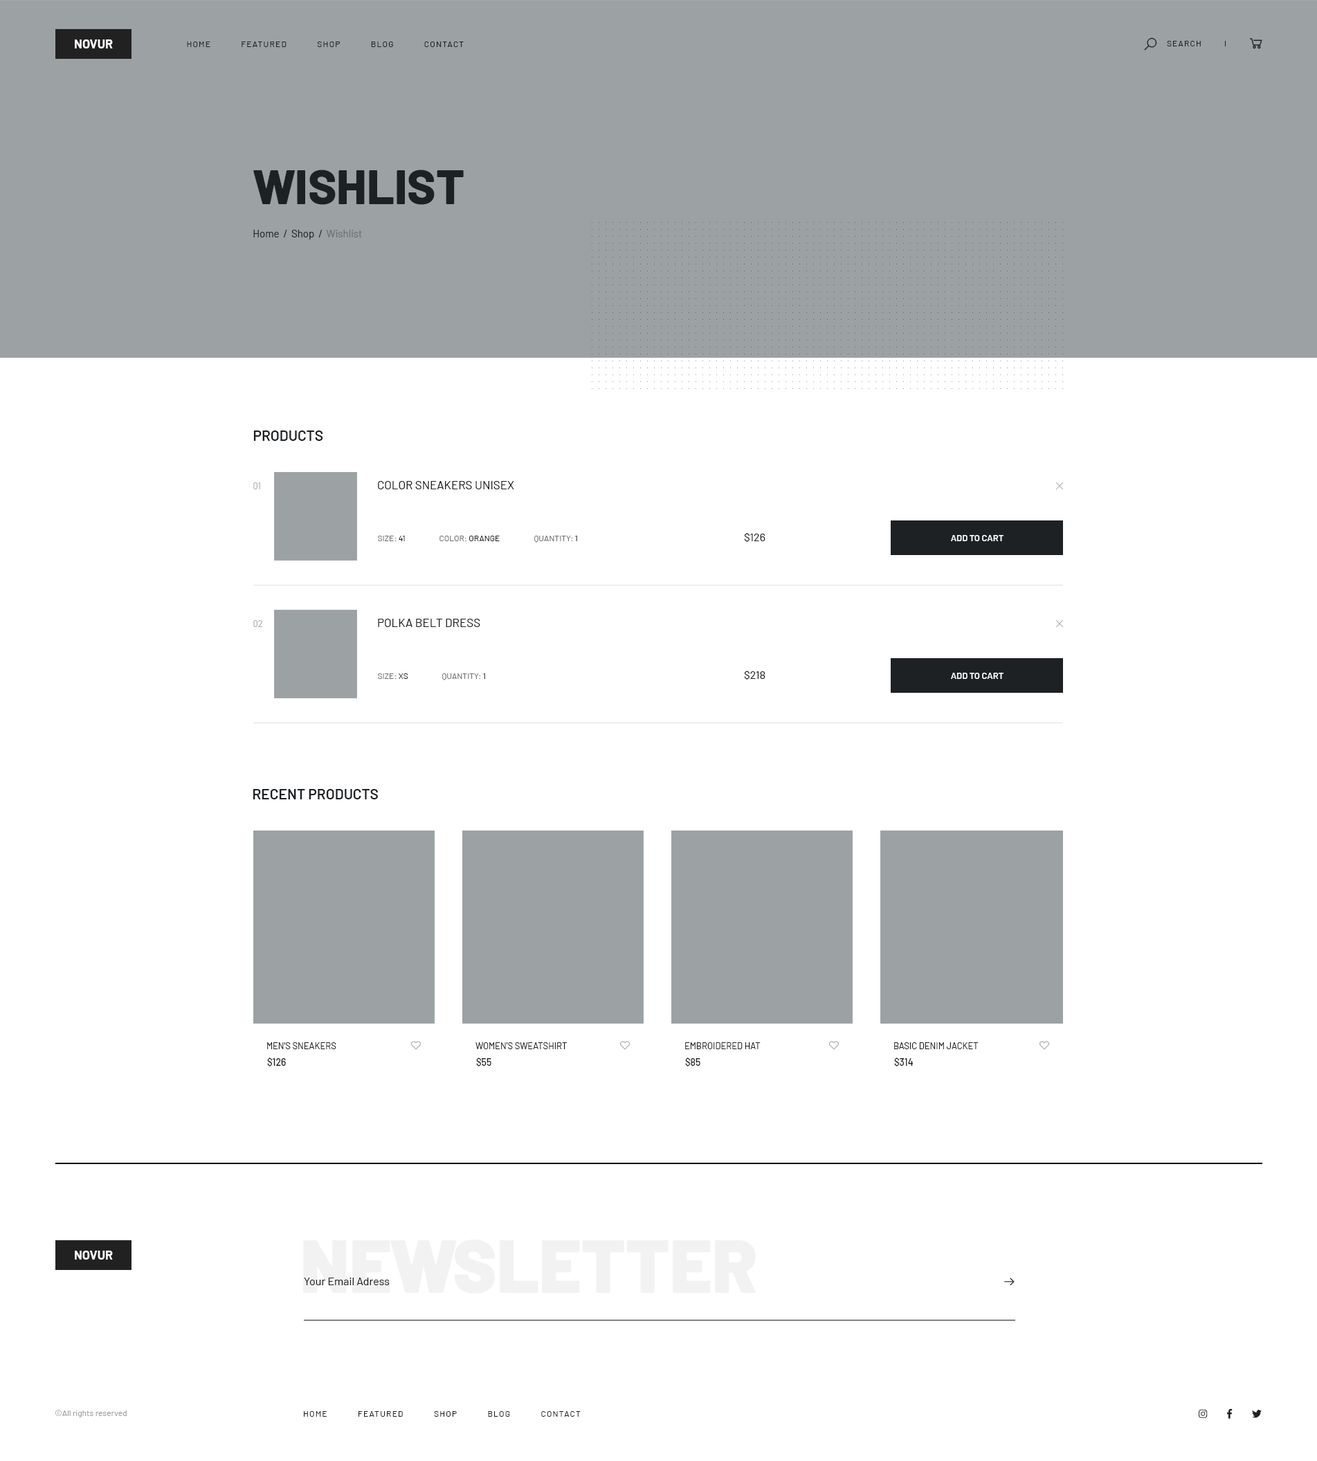
<style>
.page{position:relative;width:1317px;height:1461px;background:#ffffff}
.page>*{position:absolute;margin:0}
.t1{font:12.5px "Barlow-Bold";color:#fefefe;text-transform:uppercase}
.t2{font:8.3px "Barlow-Regular";letter-spacing:0.1em;color:#1e2124;text-transform:uppercase}
.t3{font:48.5px "Barlow-ExtraBold";color:#1e2124;text-transform:uppercase}
.t4{font:10.4px "Barlow-Regular";color:#1e2124}
.t5{font:10.4px "Barlow-Regular";color:#6e7071}
.t6{font:14.5px "Barlow-SemiBold";color:#1e2124;text-transform:uppercase}
.t7{font:9px "Barlow-Regular";color:#aaabab;text-transform:uppercase}
.t8{font:11.8px "Barlow-Regular";color:#1e2124;text-transform:uppercase}
.t9{font:11.1px "Barlow-Regular";color:#1e2124}
.t10{font:8.3px "Barlow-Regular";color:#6e7071;text-transform:uppercase}
.t11{font:8.3px "Barlow-Regular";color:#1e2124;text-transform:uppercase}
.t12{font:8.3px "Barlow-Regular";color:#1e2124}
.t13{font:9px "Barlow-SemiBold";color:#ffffff;text-transform:uppercase}
.t14{font:9px "Barlow-Regular";color:#1e2124;text-transform:uppercase}
.t15{font:9.7px "Barlow-Medium";color:#1e2124}
.t16{font:74.1px "Barlow-Black";color:#f2f2f2}
.t17{font:8.3px "Barlow-Regular";color:#9e9d9d}
</style>
<div class="page">
<p class="t1" style="left:75px;top:39px;width:38px;height:9px">novur</p>
<p class="t2" style="left:187px;top:42px;width:277px;height:5px">Home            Featured            Shop            Blog            Contact</p>
<p class="t2" style="left:1167px;top:41px;width:34px;height:5px">Search</p>
<p class="t3" style="left:253px;top:170px;width:211px;height:35px">Wishlist</p>
<p class="t4" style="left:253px;top:230px;width:109px;height:10px">Home  /  Shop  /<span class="t5">  Wishlist</span></p>
<p class="t6" style="left:253px;top:431px;width:70px;height:10px">Products</p>
<p class="t7" style="left:253px;top:483px;width:7px;height:6px">01</p>
<p class="t8" style="left:378px;top:481px;width:136px;height:8px">Color Sneakers Unisex</p>
<p class="t9" style="left:744px;top:533px;width:22px;height:9px">$126</p>
<p class="t10" style="left:378px;top:536px;width:27px;height:5px">Size:<span class="t11"> 41</span></p>
<p class="t10" style="left:440px;top:536px;width:60px;height:5px">Color:<span class="t11"> Orange</span></p>
<p class="t10" style="left:534px;top:536px;width:43px;height:7px">Quantity: <span class="t12">1</span></p>
<p class="t13" style="left:951px;top:535px;width:53px;height:6px">Add to cart</p>
<p class="t7" style="left:253px;top:620px;width:10px;height:7px">02</p>
<p class="t8" style="left:378px;top:619px;width:102px;height:8px">Polka Belt Dress</p>
<p class="t10" style="left:378px;top:674px;width:30px;height:5px">Size:<span class="t11"> XS</span></p>
<p class="t10" style="left:442px;top:674px;width:43px;height:7px">Quantity: <span class="t12">1</span></p>
<p class="t9" style="left:744px;top:671px;width:22px;height:9px">$218</p>
<p class="t13" style="left:951px;top:673px;width:53px;height:6px">Add to cart</p>
<p class="t6" style="left:253px;top:789px;width:125px;height:11px">Recent Products</p>
<p class="t14" style="left:267px;top:1043px;width:69px;height:7px">Men's Sneakers</p>
<p class="t14" style="left:476px;top:1043px;width:91px;height:7px">Women's Sweatshirt</p>
<p class="t14" style="left:685px;top:1043px;width:76px;height:7px">Embroidered Hat</p>
<p class="t14" style="left:894px;top:1043px;width:85px;height:7px">Basic Denim Jacket</p>
<p class="t15" style="left:267px;top:1058px;width:19px;height:9px">$126</p>
<p class="t15" style="left:476px;top:1058px;width:16px;height:9px">$55</p>
<p class="t15" style="left:685px;top:1058px;width:16px;height:9px">$85</p>
<p class="t15" style="left:894px;top:1058px;width:20px;height:9px">$314</p>
<p class="t16" style="left:303px;top:1240px;width:453px;height:54px">NEWSLETTER</p>
<p class="t1" style="left:75px;top:1251px;width:38px;height:9px">Novur</p>
<p class="t9" style="left:304px;top:1278px;width:86px;height:8px">Your Email Adress</p>
<p class="t17" style="left:55px;top:1410px;width:72px;height:8px">©All rights reserved</p>
<p class="t2" style="left:304px;top:1412px;width:277px;height:5px">Home            Featured            Shop            Blog            Contact</p>
</div>
